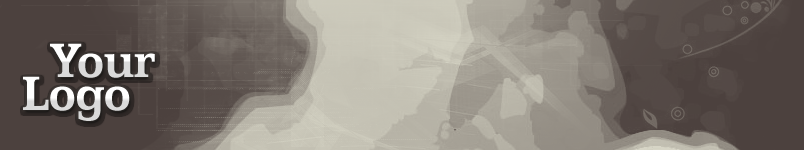
<style>
.page{position:relative;width:804px;height:150px}
.page>*{position:absolute;margin:0}
.t1{font:54px "Egyptian505BT-Bold";letter-spacing:-0.01em;color:#ffffff}
</style>
<div class="page">
<p class="t1" style="left:50px;top:43px;width:105px;height:35px">Your</p>
<p class="t1" style="left:23px;top:76px;width:107px;height:45px">Logo</p>
</div>
